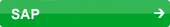
<style>
.page{position:relative;width:170px;height:27px;background:#00a42b}
.page>*{position:absolute;margin:0}
.t1{font:14px "Arial-BoldMT";color:#ffffff}
</style>
<div class="page">
<p class="t1" style="left:11px;top:8px;width:29px;height:12px">SAP</p>
</div>
